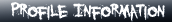
<style>
.page{position:relative;width:172px;height:22px}
.page>*{position:absolute;margin:0}
.t1{font:25px "YouMurdererBB";color:#ffffff}
</style>
<div class="page">
<p class="t1" style="left:11px;top:2px;width:155px;height:20px">Profile Information</p>
</div>
